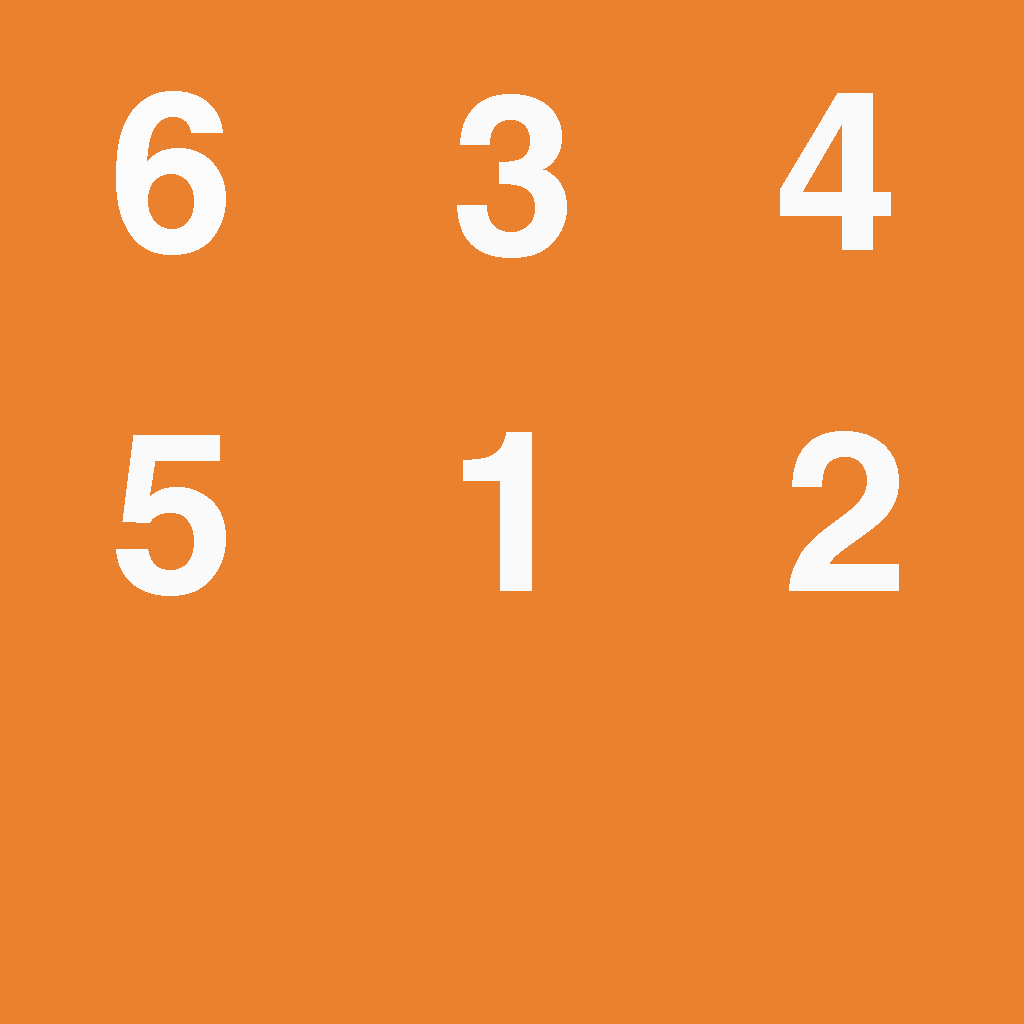
<style>
.page{position:relative;width:1024px;height:1024px;background:#e9812e}
.page>*{position:absolute;margin:0}
.t1{font:224px "Helvetica-Bold";letter-spacing:0.075em;color:#fbfbfb}
.t2{font:224px "Helvetica-Bold";letter-spacing:0.075em;color:#fafafa}
</style>
<div class="page">
<p class="t1" style="left:116px;top:91px;width:110px;height:164px">6</p>
<p class="t2" style="left:457px;top:94px;width:110px;height:164px">3</p>
<p class="t2" style="left:780px;top:93px;width:111px;height:157px">4</p>
<p class="t2" style="left:116px;top:435px;width:110px;height:161px">5</p>
<p class="t2" style="left:463px;top:432px;width:69px;height:159px">1</p>
<p class="t2" style="left:789px;top:431px;width:110px;height:160px">2</p>
</div>
